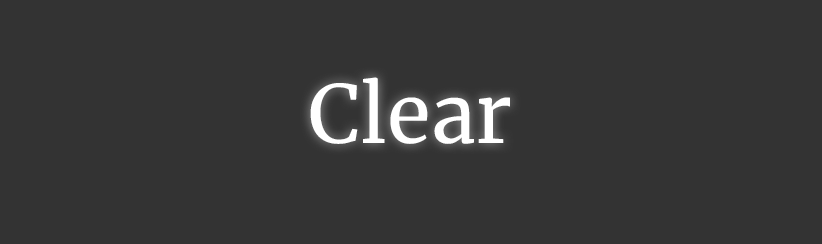
<style>
.page{position:relative;width:822px;height:244px;background:#333333}
.page>*{position:absolute;margin:0}
.t1{font:80px "Merriweather-Regular";color:#ffffff}
</style>
<div class="page">
<p class="t1" style="left:310px;top:77px;width:200px;height:67px">Clear</p>
</div>
